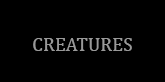
<style>
.page{position:relative;width:165px;height:82px;background:#000000}
.page>*{position:absolute;margin:0}
.t1{font:19.1px "Cambria";color:#999999}
</style>
<div class="page">
<p class="t1" style="left:33px;top:38px;width:99px;height:13px">CREATURES</p>
</div>
